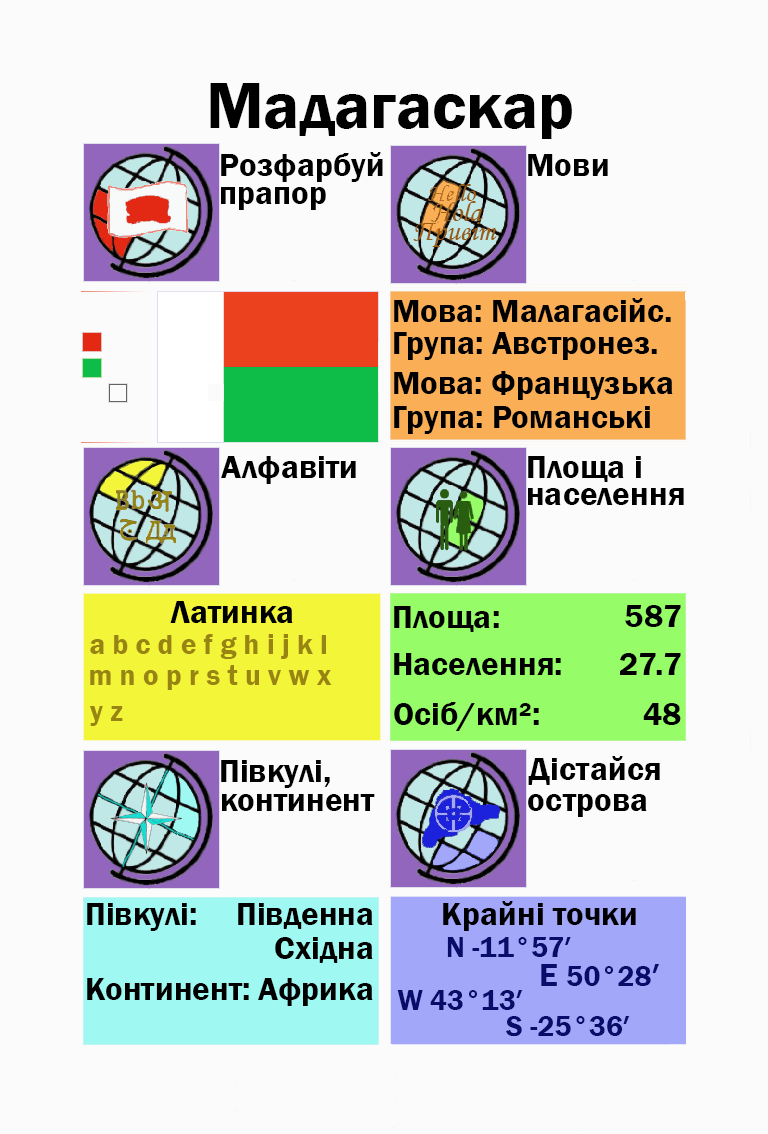
<style>
.page{position:relative;width:768px;height:1134px;background:#fbfbfb}
.page>*{position:absolute;margin:0}
.t1{font:66.7px "FranklinGothic-Demi";color:#000000}
.t2{font:33.3px "FranklinGothic-Demi";color:#000000}
.t3{font:33.3px "FranklinGothic-Demi";color:#000003}
.t4{font:29.2px "FranklinGothic-Demi";color:#988413}
.t5{font:29.2px "FranklinGothic-Demi";color:#090c69}
.t6{font:33.3px "FranklinGothic-Demi";color:#090c69}
</style>
<div class="page">
<p class="t1" style="left:210px;top:83px;width:362px;height:56px">Мадагаскар</p>
<p class="t2" style="left:221px;top:152px;width:162px;height:30px">Розфарбуй</p>
<p class="t2" style="left:528px;top:154px;width:80px;height:22px">Мови</p>
<p class="t2" style="left:221px;top:187px;width:105px;height:23px">прапор</p>
<p class="t2" style="left:394px;top:298px;width:277px;height:24px">Мова: Малагасійс.</p>
<p class="t2" style="left:394px;top:332px;width:263px;height:28px">Група: Австронез.</p>
<p class="t2" style="left:394px;top:371px;width:279px;height:29px">Мова: Французька</p>
<p class="t2" style="left:394px;top:406px;width:256px;height:28px">Група: Романські</p>
<p class="t2" style="left:221px;top:456px;width:135px;height:28px">Алфавіти</p>
<p class="t2" style="left:528px;top:456px;width:113px;height:26px">Площа і</p>
<p class="t2" style="left:528px;top:488px;width:156px;height:17px">населення</p>
<p class="t2" style="left:170px;top:601px;width:123px;height:22px">Латинка</p>
<p class="t2" style="left:394px;top:606px;width:105px;height:26px">Площа:</p>
<p class="t3" style="left:625px;top:605px;width:56px;height:22px">587</p>
<p class="t4" style="left:90px;top:634px;width:236px;height:25px">a b c d e f g h i j k l</p>
<p class="t2" style="left:394px;top:653px;width:167px;height:22px">Населення:</p>
<p class="t2" style="left:620px;top:653px;width:61px;height:22px">27.7</p>
<p class="t4" style="left:90px;top:665px;width:242px;height:25px">m n o p r s t u v w x</p>
<p class="t2" style="left:394px;top:702px;width:145px;height:29px">Осіб/км²:</p>
<p class="t4" style="left:89px;top:706px;width:34px;height:20px">y z</p>
<p class="t2" style="left:643px;top:703px;width:38px;height:22px">48</p>
<p class="t2" style="left:221px;top:760px;width:109px;height:28px">Півкулі,</p>
<p class="t2" style="left:528px;top:756px;width:132px;height:29px">Дістайся</p>
<p class="t2" style="left:222px;top:794px;width:153px;height:17px">континент</p>
<p class="t2" style="left:528px;top:794px;width:119px;height:23px">острова</p>
<p class="t2" style="left:87px;top:903px;width:109px;height:28px">Півкулі:</p>
<p class="t2" style="left:238px;top:903px;width:135px;height:26px">Південна</p>
<p class="t3" style="left:443px;top:901px;width:193px;height:30px">Крайні точки</p>
<p class="t2" style="left:275px;top:937px;width:98px;height:26px">Східна</p>
<p class="t5" style="left:447px;top:937px;width:124px;height:20px">N -11°57′</p>
<p class="t5" style="left:541px;top:964px;width:118px;height:22px"><span class="t6">E </span>50°28<span class="t6">′</span></p>
<p class="t2" style="left:87px;top:978px;width:162px;height:22px">Континент:</p>
<p class="t2" style="left:258px;top:978px;width:115px;height:28px">Африка</p>
<p class="t5" style="left:397px;top:990px;width:126px;height:20px">W 43°13′</p>
<p class="t5" style="left:506px;top:1016px;width:124px;height:21px">S -25°36′</p>
</div>
